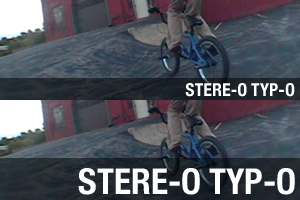
<style>
.page{position:relative;width:300px;height:200px}
.page>*{position:absolute;margin:0}
.t1{font:18px "HelveticaNeue-CondensedBold";color:#ffffff;text-transform:uppercase}
.t2{font:35.8px "HelveticaNeue-CondensedBold";color:#ffffff;text-transform:uppercase}
</style>
<div class="page">
<p class="t1" style="left:185px;top:83px;width:110px;height:14px">STERE-O TYP-O</p>
<p class="t2" style="left:78px;top:168px;width:217px;height:27px">STERE-O TYP-O</p>
</div>
